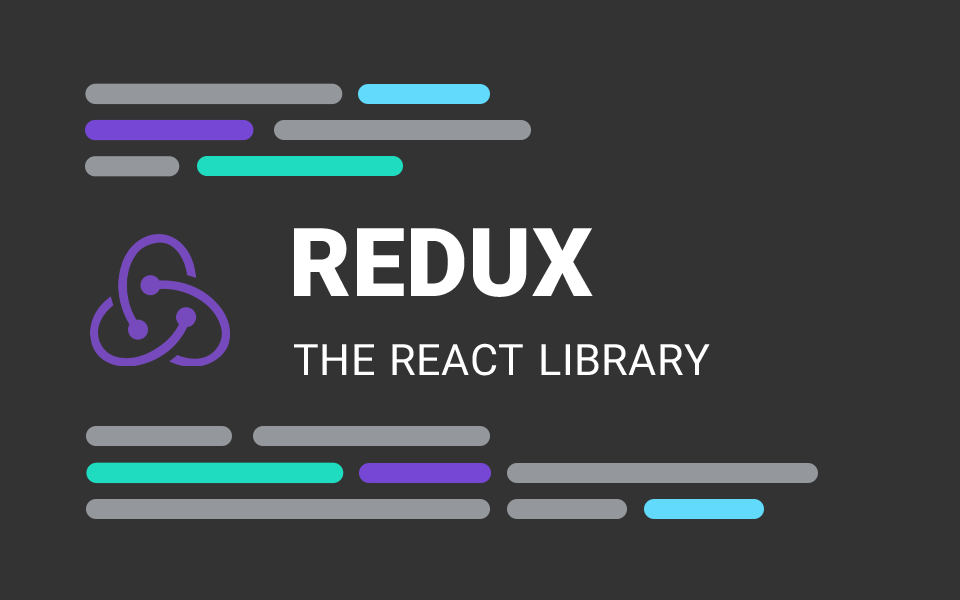
<style>
.page{position:relative;width:960px;height:600px;background:#333333}
.page>*{position:absolute;margin:0}
.t1{font:95.2px "IRANYekan-ExtraBold";letter-spacing:0.009em;color:#ffffff}
.t2{font:43.1px "IRANYekan";letter-spacing:0.009em;color:#ffffff}
</style>
<div class="page">
<p class="t1" style="left:294px;top:228px;width:299px;height:69px">REDUX</p>
<p class="t2" style="left:294px;top:343px;width:416px;height:33px">THE REACT LIBRARY</p>
</div>
